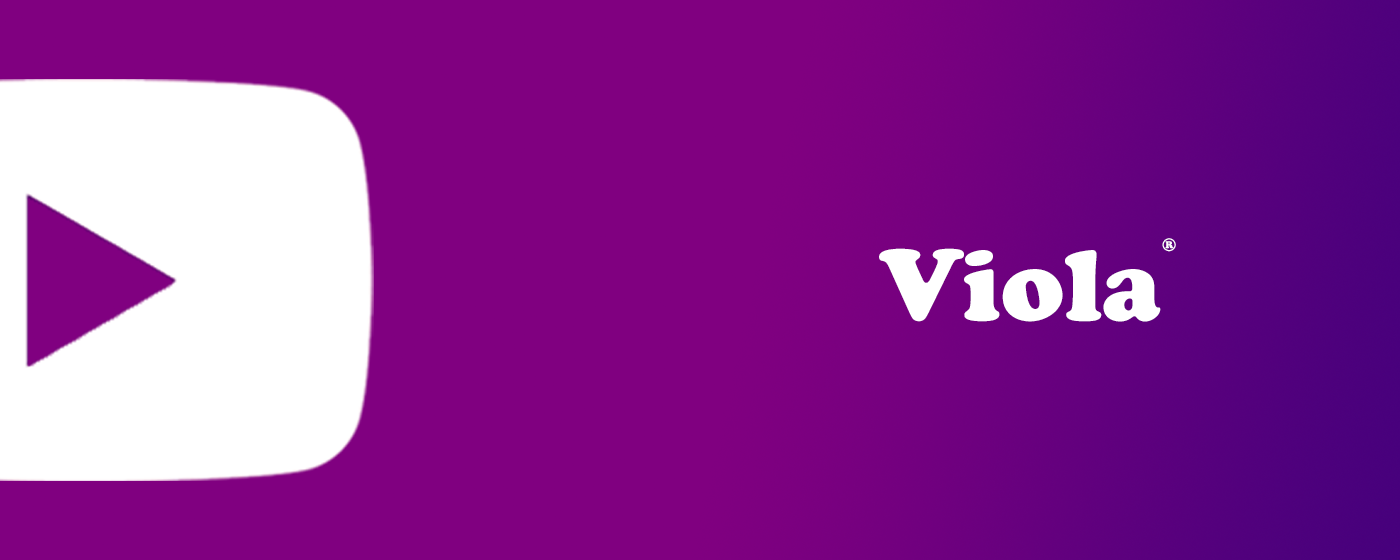
<style>
.page{position:relative;width:1400px;height:560px;background:#800080}
.page>*{position:absolute;margin:0}
.t1{font:18px "CooperBlackStd";color:#ffffff}
.t2{font:100px "CooperBlackStd";color:#ffffff}
</style>
<div class="page">
<p class="t1" style="left:1162px;top:238px;width:14px;height:14px">®</p>
<p class="t2" style="left:879px;top:248px;width:282px;height:74px">Viola</p>
</div>
